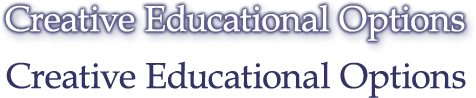
<style>
.page{position:relative;width:476px;height:98px;background:#ffffff}
.page>*{position:absolute;margin:0}
.t1{font:36px "BookAntiqua";color:#ffffff}
.t2{font:36px "BookAntiqua";color:#333366}
</style>
<div class="page">
<p class="t1" style="left:5px;top:4px;width:460px;height:37px">Creative Educational Options</p>
<p class="t2" style="left:6px;top:61px;width:460px;height:37px">Creative Educational Options</p>
</div>
